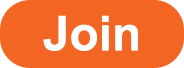
<style>
.page{position:relative;width:184px;height:68px;background:#f26522}
.page>*{position:absolute;margin:0}
.t1{font:48px "Arial-BoldMT";color:#ffffff}
</style>
<div class="page">
<p class="t1" style="left:43px;top:15px;width:95px;height:36px">Join</p>
</div>
